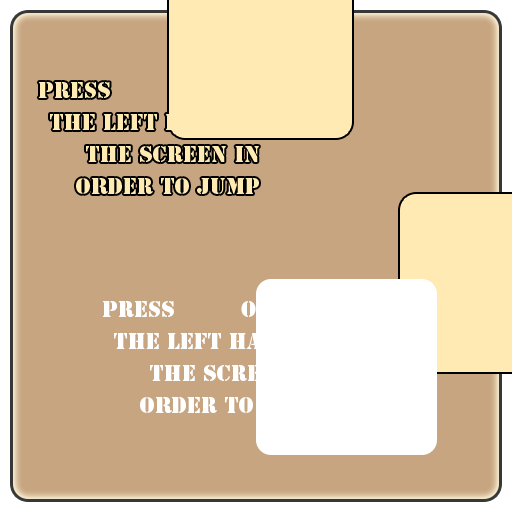
<style>
.page{position:relative;width:512px;height:512px;background:#c8a581}
.page>*{position:absolute;margin:0}
.t1{font:21px/32px "StencilStd";letter-spacing:0.01em;color:#feeab2}
.t2{font:21px/32px "StencilStd";letter-spacing:0.01em;color:#ffffff}
</style>
<div class="page">
<p class="t1" style="left:38px;top:82px;width:222px;height:112px;text-align:right">press         or tap <br>the Left half of the screen in order to jump</p>
<p class="t2" style="left:102px;top:301px;width:222px;height:112px;text-align:right">press         or tap <br>the Left half of the screen in order to jump</p>
</div>
